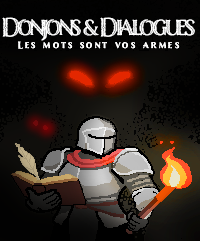
<style>
.page{position:relative;width:200px;height:241px}
.page>*{position:absolute;margin:0}
.t1{font:24px "NelsonEngraved";letter-spacing:-0.12em;color:#ffffff}
.t2{font:9px "NelsonEngraved";letter-spacing:0.26em;color:#ffffff}
</style>
<div class="page">
<p class="t1" style="left:2px;top:17px;width:193px;height:24px">Donjons &amp; Dialogues</p>
<p class="t2" style="left:18px;top:41px;width:162px;height:8px">Les mots sont vos armes</p>
</div>
